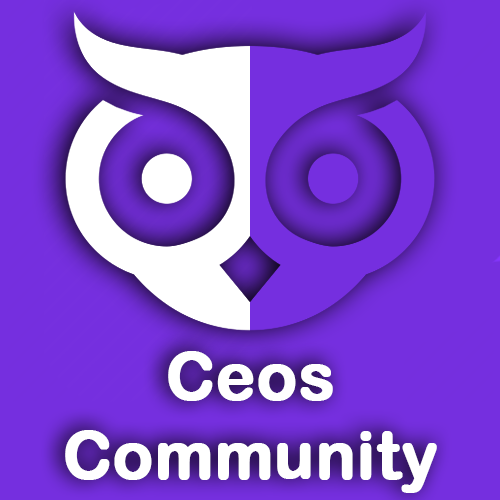
<style>
.page{position:relative;width:500px;height:500px;background:#752fdf}
.page>*{position:absolute;margin:0}
.t1{font:65.9px "ArialRoundedMTBold";color:#ffffff;font-weight:bold}
</style>
<div class="page">
<p class="t1" style="left:65px;top:351px;width:372px;height:142px;text-align:center">Ceos Community</p>
</div>
